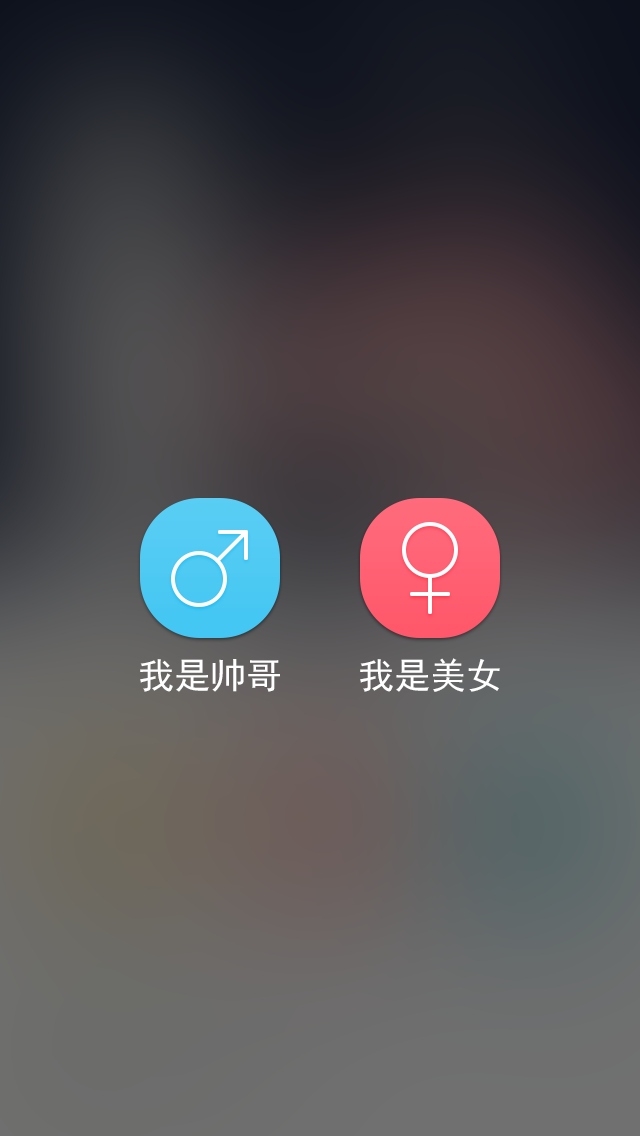
<style>
.page{position:relative;width:640px;height:1136px}
.page>*{position:absolute;margin:0}
.t1{font:36px "SimHei";color:#ffffff}
</style>
<div class="page">
<p class="t1" style="left:140px;top:659px;width:140px;height:33px">我是帅哥</p>
<p class="t1" style="left:360px;top:658px;width:140px;height:34px">我是美女</p>
</div>
